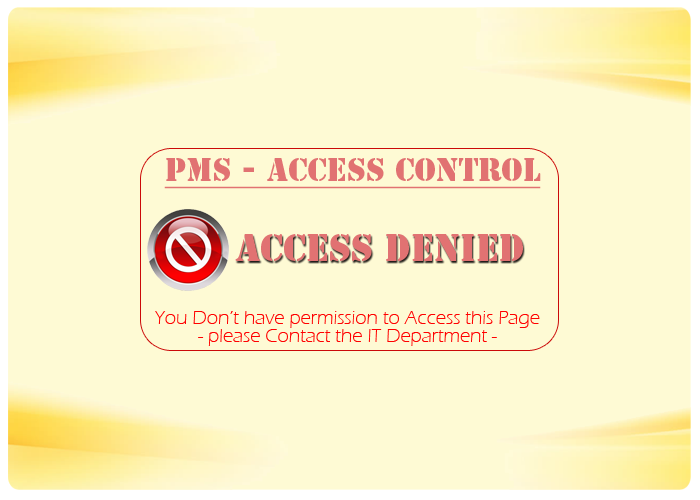
<style>
.page{position:relative;width:700px;height:500px;background:#fefad4}
.page>*{position:absolute;margin:0}
.t1{font:30px "StencilStd";color:#e17272;text-decoration:underline}
.t2{font:35px "StencilStd";color:#e17272}
.t3{font:20px/17.9px "ErasITC-Light";color:#ff0000}
</style>
<div class="page">
<p class="t1" style="left:164px;top:158px;width:377px;height:31px">PMS - Access Control</p>
<p class="t2" style="left:235px;top:234px;width:288px;height:27px">ACCESS DENIED</p>
<p class="t3" style="left:155px;top:311px;width:385px;height:35px;text-align:center">You Don’t have permission to Access this Page<br>- please Contact the IT Department -</p>
</div>
